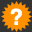
<style>
.page{position:relative;width:32px;height:32px;background:#ff9000}
.page>*{position:absolute;margin:0}
.t1{font:21.9px "Helvetica-Bold";letter-spacing:-0.04em;color:#ffffff}
</style>
<div class="page">
<p class="t1" style="left:10px;top:8px;width:12px;height:17px">?</p>
</div>
